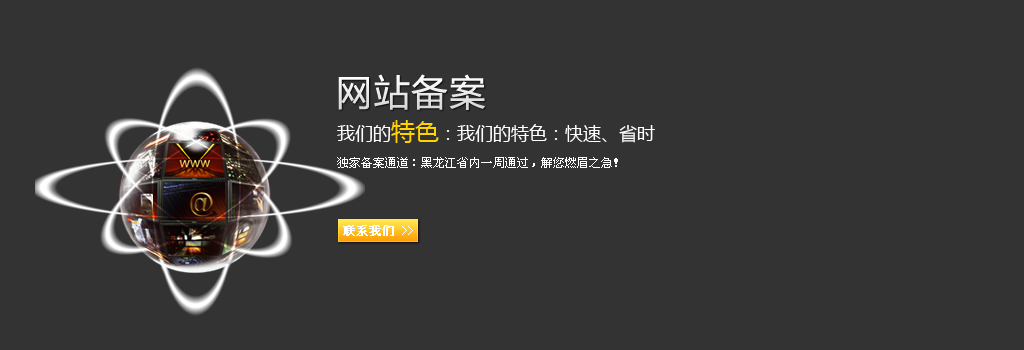
<style>
.page{position:relative;width:1024px;height:350px;background:#333333}
.page>*{position:absolute;margin:0}
.t1{font:36px "MicrosoftYaHei";letter-spacing:0.05em;color:#d6d6d6}
.t2{font:18px "MicrosoftYaHei";color:#ffffff}
.t3{font:24px "MicrosoftYaHei";color:#ffd200}
.t4{font:12px "SimSun";color:#ffffff}
.t5{font:12px "SimSun";color:#ffffff;font-weight:bold}
</style>
<div class="page">
<p class="t1" style="left:338px;top:74px;width:147px;height:36px">网站备案</p>
<p class="t2" style="left:337px;top:120px;width:318px;height:23px">我们的<span class="t3">特色</span>：我们的特色：快速、省时</p>
<p class="t4" style="left:337px;top:157px;width:281px;height:11px">独家备案通道：黑龙江省内一周通过，解您燃眉之急！</p>
<p class="t5" style="left:343px;top:225px;width:70px;height:11px">联系我们<span class="t4"> &gt;&gt;</span></p>
</div>
